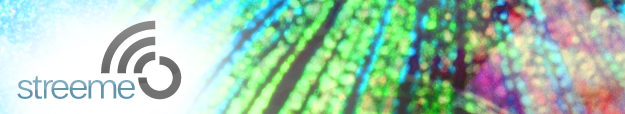
<style>
.page{position:relative;width:625px;height:114px}
.page>*{position:absolute;margin:0}
.t1{font:34.9px "Kalinga"}
</style>
<div class="page">
<p class="t1" style="left:17px;top:76px;width:118px;height:23px">streeme</p>
</div>
